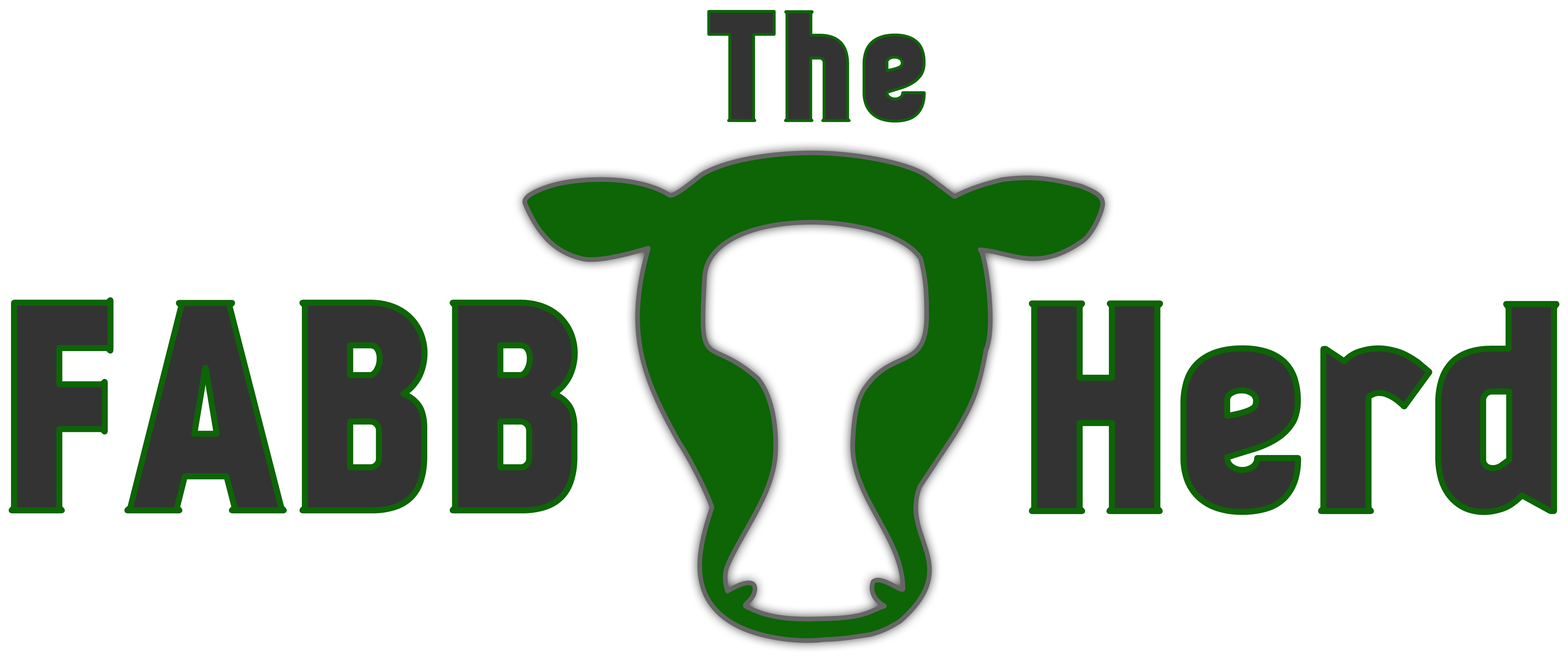
<style>
.page{position:relative;width:1568px;height:664px;background:#ffffff}
.page>*{position:absolute;margin:0}
.t1{font:148px "Kankin";letter-spacing:0.02em;color:#333333}
.t2{font:281.1px "Kankin";letter-spacing:0.02em;color:#333333}
.t3{font:281.1px "Kankin";color:#333333}
</style>
<div class="page">
<p class="t1" style="left:709px;top:11px;width:215px;height:110px">The</p>
<p class="t2" style="left:11px;top:300px;width:564px;height:210px">FABB</p>
<p class="t3" style="left:1032px;top:303px;width:525px;height:209px">Herd</p>
</div>
